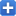
<style>
.page{position:relative;width:16px;height:16px}
.page>*{position:absolute;margin:0}
.t1{font:20px "Helvetica-Bold";color:#ffffff}
</style>
<div class="page">
<p class="t1" style="left:2px;top:2px;width:12px;height:12px">+</p>
</div>
